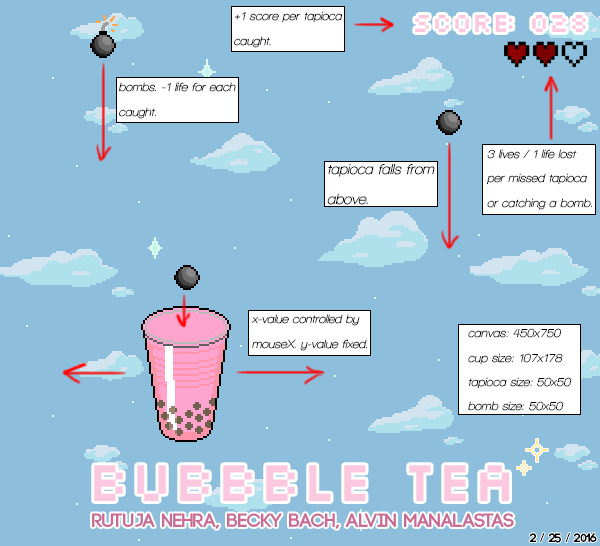
<style>
.page{position:relative;width:600px;height:546px;background:#8dbfdd}
.page>*{position:absolute;margin:0}
.t1{font:12px/24.4px "WalkwayObliqueSemiBold";color:#000000}
.t2{font:28.4px "Silkscreen";color:#fbc8df}
.t3{font:14.8px/30px "WalkwayObliqueSemiBold";color:#000000}
.t4{font:60px "Silkscreen";color:#fbc8df}
.t5{font:19.5px "Code-Bold";color:#c86c96}
.t6{font:12px "Code-Bold";color:#000000}
.t7{font:12px "MyriadPro-Regular";color:#000000}
</style>
<div class="page">
<p class="t1" style="left:234px;top:11px;width:109px;height:37px">+1 score per tapioca<br>caught.</p>
<p class="t2" style="left:415px;top:15px;width:171px;height:17px">score: 028</p>
<p class="t1" style="left:119px;top:82px;width:117px;height:37px">bombs. -1 life for each <br>caught.</p>
<p class="t1" style="left:487px;top:149px;width:105px;height:61px">3 lives / 1 life lost <br>per missed tapioca<br>or catching a bomb.</p>
<p class="t3" style="left:327px;top:163px;width:108px;height:42px">tapioca falls from<br>above.</p>
<p class="t1" style="left:251px;top:314px;width:117px;height:37px">x-value controlled by<br>mouseX. y-value fixed.</p>
<p class="t1" style="left:468px;top:328px;width:104px;height:83px">canvas: 450x750<br>cup size: 107x178<br>tapioca size: 50x50<br>bomb size: 50x50</p>
<p class="t4" style="left:94px;top:465px;width:415px;height:36px">bubbble tea</p>
<p class="t5" style="left:92px;top:513px;width:422px;height:16px">rutuja nehra, becky bach, alvin Manalastas</p>
<p class="t6" style="left:529px;top:533px;width:68px;height:10px">2 <span class="t7">/</span> 25 <span class="t7">/</span> 2016</p>
</div>
